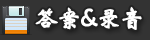
<style>
.page{position:relative;width:150px;height:40px;background:#333333}
.page>*{position:absolute;margin:0}
.t1{font:24px "STXinwei";letter-spacing:-0.05em;color:#ffffff;font-weight:bold}
</style>
<div class="page">
<p class="t1" style="left:35px;top:6px;width:107px;height:24px">答案&amp;录音</p>
</div>
